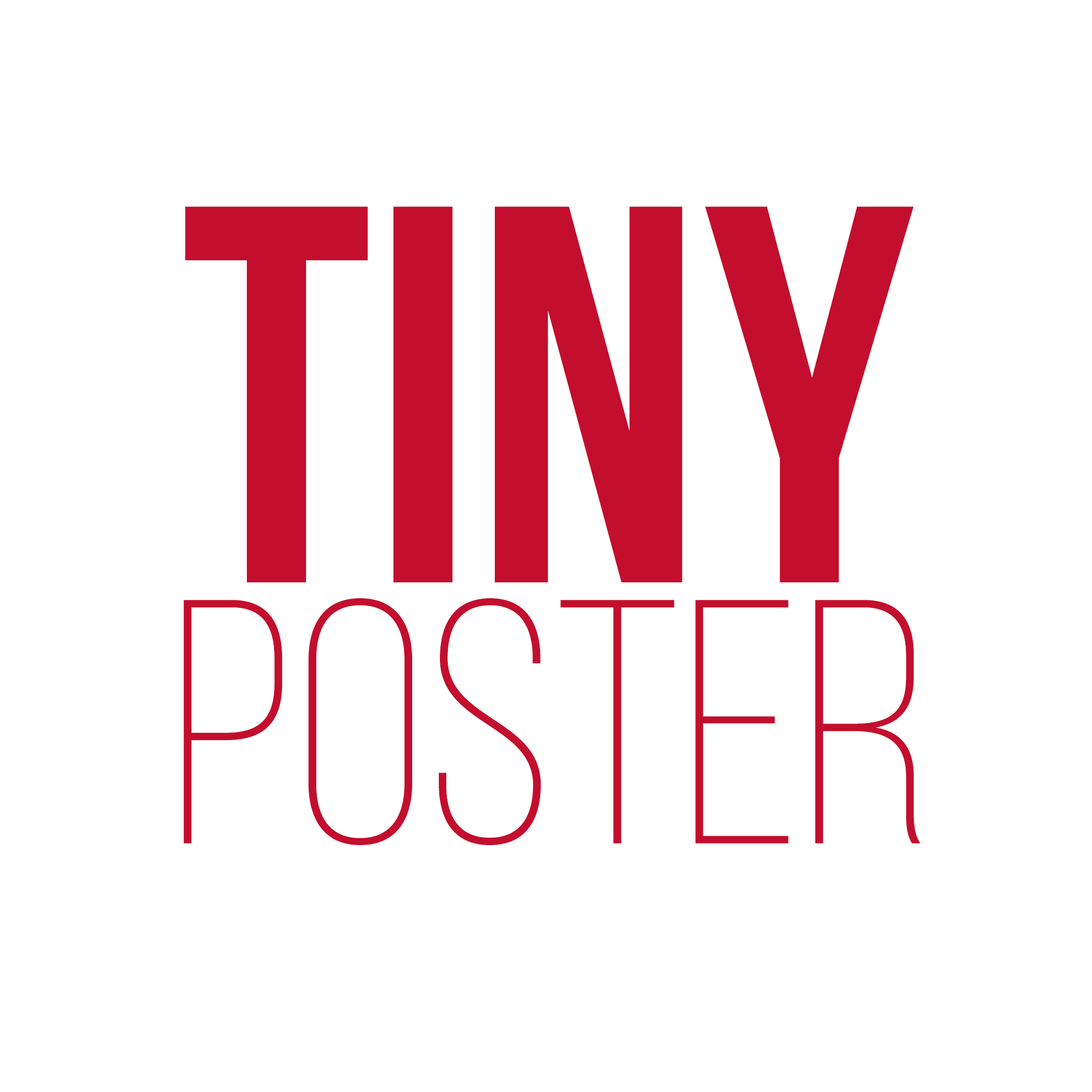
<style>
.page{position:relative;width:1092px;height:1092px;background:#ffffff}
.page>*{position:absolute;margin:0}
.t1{font:536.7px "BebasNeueBold";color:#c30e2e}
.t2{font:347.6px "BebasNeueLight";color:#c30e2e}
</style>
<div class="page">
<p class="t1" style="left:185px;top:206px;width:729px;height:377px">TINY</p>
<p class="t2" style="left:183px;top:598px;width:738px;height:247px">Poster</p>
</div>
